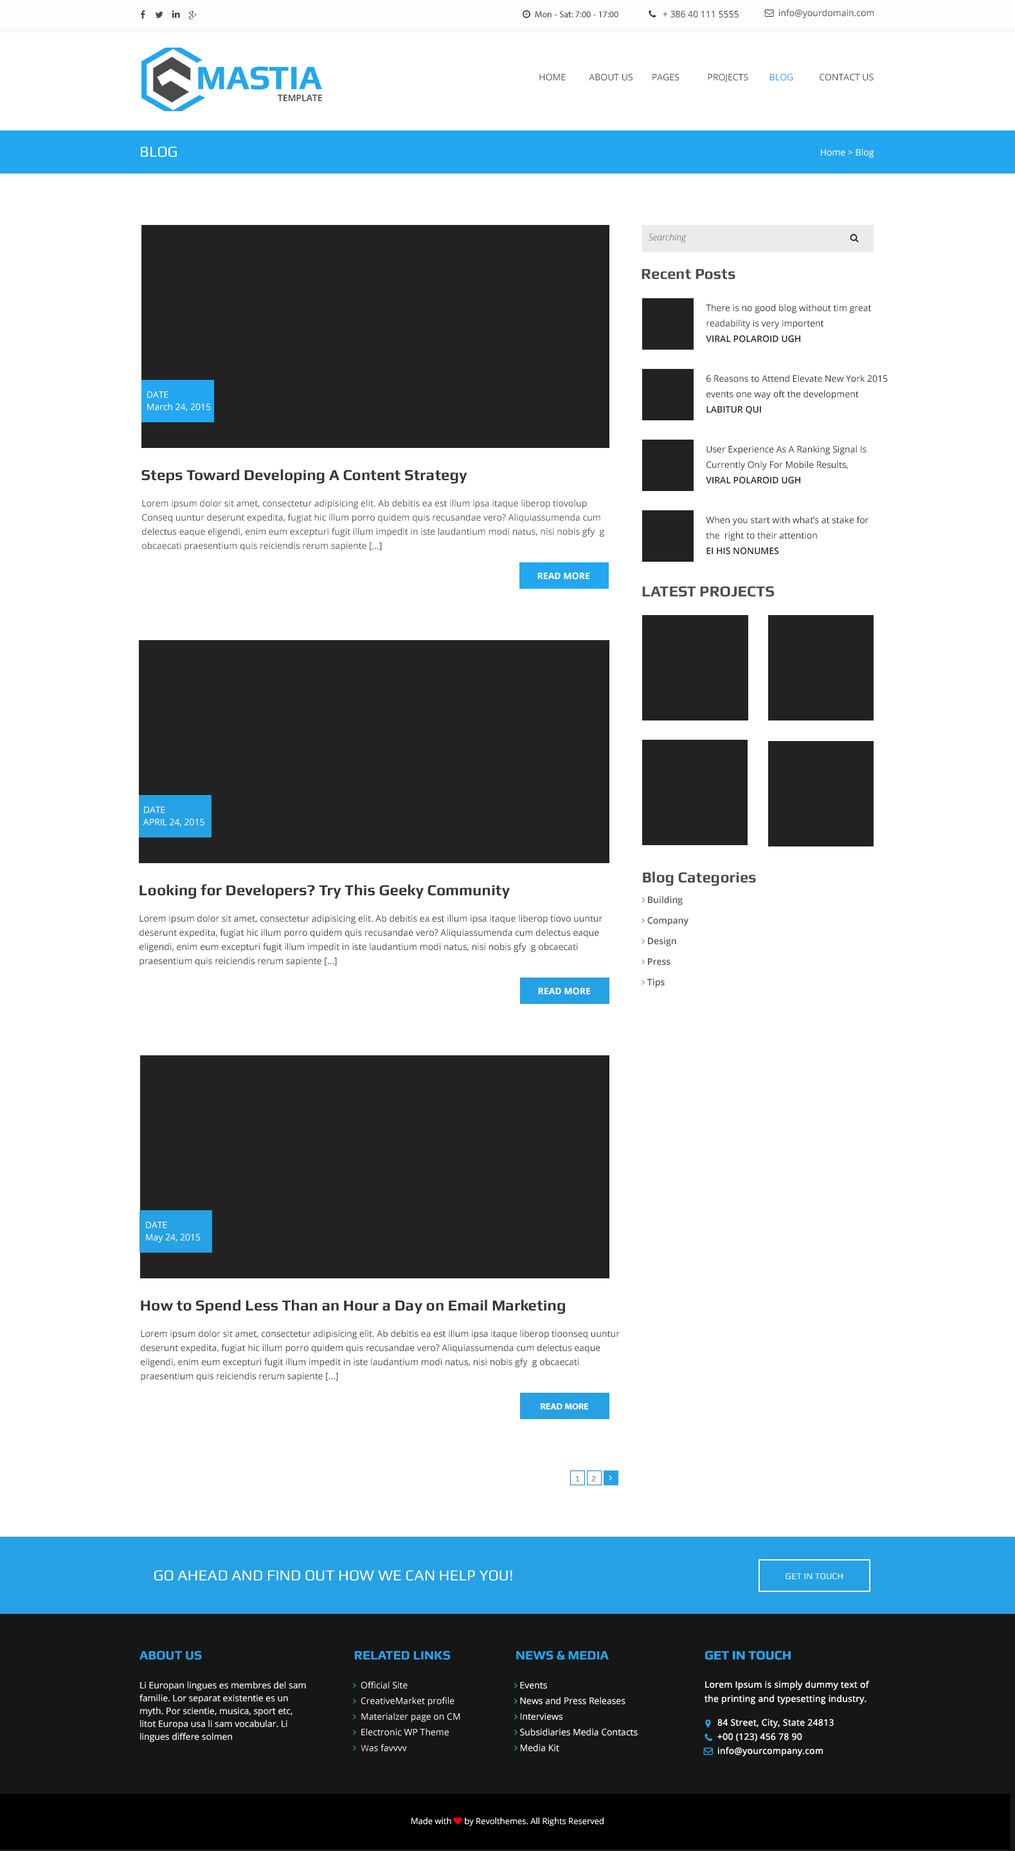
<style>
.page{position:relative;width:1015px;height:1851px;background:#ffffff}
.page>*{position:absolute;margin:0}
.t1{font:9px "OpenSans";color:#4b4b4b;text-transform:uppercase}
.t2{font:9px "OpenSans";color:#26a1e4;text-transform:uppercase}
.t3{font:15.4px "Play";color:#ffffff;text-transform:uppercase}
.t4{font:9px "OpenSans";color:#ffffff}
.t5{font:9px "OpenSansLight-Italic";color:#222222}
.t6{font:15.4px "Play-Bold";color:#4b4b4b}
.t7{font:9px/15.4px "OpenSans";color:#222222}
.t8{font:9px/15.4px "OpenSans-Semibold";color:#222222;text-transform:uppercase}
.t9{font:9px/12.2px "OpenSans";color:#ffffff}
.t10{font:15.4px "Play-Bold";color:#353535}
.t11{font:9px/14.1px "OpenSans";color:#4b4b4b}
.t12{font:9px "OpenSans-Bold";color:#ffffff}
.t13{font:9px/14.1px "OpenSans";color:#353535}
.t14{font:9px "MyriadPro-Bold";color:#ffffff}
.t15{font:9px "Raleway";color:#666666}
.t16{font:15.4px "Play";color:#ffffff}
.t17{font:9px "Play";color:#ffffff}
.t18{font:12.9px "Play-Bold";color:#22a7f0;text-transform:uppercase}
.t19{font:9px/14.1px "OpenSans";letter-spacing:0.02em;color:#ffffff}
.t20{font:12.9px/14.1px "Play-Bold";color:#22a7f0;text-transform:uppercase}
.t21{font:9px/12.9px "OpenSans";color:#ffffff}
</style>
<div class="page">
<p class="t1" style="left:539px;top:73px;width:335px;height:9px">HOME          ABOUT US        Pages            PROJECTS         <span class="t2">BLOG           </span>Contact us</p>
<p class="t3" style="left:141px;top:147px;width:36px;height:11px">BLOG</p>
<p class="t4" style="left:821px;top:148px;width:53px;height:10px">Home &gt; Blog</p>
<p class="t5" style="left:649px;top:233px;width:38px;height:10px">Searching</p>
<p class="t6" style="left:642px;top:269px;width:93px;height:11px">Recent Posts</p>
<p class="t7" style="left:706px;top:304px;width:166px;height:39px">There is no good blog without tim great readability is very importent<br><span class="t8">Viral polaroid ugh</span></p>
<p class="t7" style="left:706px;top:375px;width:182px;height:40px">6 Reasons to Attend Elevate New York 2015<br>events one way oft the development<br><span class="t8">labitur qui</span></p>
<p class="t9" style="left:147px;top:392px;width:64px;height:19px">DATE<br>March 24, 2015</p>
<p class="t7" style="left:706px;top:446px;width:161px;height:38px">User Experience As A Ranking Signal Is  Currently Only For Mobile Results,<br><span class="t8">Viral polaroid ugh</span></p>
<p class="t10" style="left:141px;top:469px;width:326px;height:15px">Steps Toward Developing A Content Strategy</p>
<p class="t11" style="left:142px;top:500px;width:462px;height:52px">Lorem ipsum dolor sit amet, consectetur adipisicing elit. Ab debitis ea est illum ipsa itaque liberop tiovolup Conseq uuntur deserunt expedita, fugiat hic illum porro quidem quis recusandae vero? Aliquiassumenda cum delectus eaque eligendi, enim eum excepturi fugit illum impedit in iste laudantium modi natus, nisi nobis gfy  g obcaecati praesentium quis reiciendis rerum sapiente […]</p>
<p class="t7" style="left:706px;top:516px;width:163px;height:39px">When you start with what’s at stake for <br>the  right to their attention<br><span class="t8">Ei his nonumes</span></p>
<p class="t12" style="left:537px;top:572px;width:53px;height:8px">READ MORE</p>
<p class="t6" style="left:642px;top:586px;width:133px;height:11px">LATEST PROJECTS</p>
<p class="t9" style="left:143px;top:807px;width:61px;height:20px">DATE<br>APRIL 24, 2015</p>
<p class="t10" style="left:140px;top:885px;width:370px;height:14px">Looking for Developers? Try This Geeky Community</p>
<p class="t13" style="left:140px;top:915px;width:462px;height:52px">Lorem ipsum dolor sit amet, consectetur adipisicing elit. Ab debitis ea est illum ipsa itaque liberop tiovo uuntur deserunt expedita, fugiat hic illum porro quidem quis recusandae vero? Aliquiassumenda cum delectus eaque eligendi, enim eum excepturi fugit illum impedit in iste laudantium modi natus, nisi nobis gfy  g obcaecati praesentium quis reiciendis rerum sapiente […]</p>
<p class="t12" style="left:538px;top:987px;width:52px;height:8px">READ MORE</p>
<p class="t9" style="left:146px;top:1222px;width:55px;height:21px">DATE<br>May 24, 2015</p>
<p class="t10" style="left:141px;top:1300px;width:424px;height:15px">How to Spend Less Than an Hour a Day on Email Marketing</p>
<p class="t13" style="left:141px;top:1330px;width:479px;height:52px">Lorem ipsum dolor sit amet, consectetur adipisicing elit. Ab debitis ea est illum ipsa itaque liberop tioonseq uuntur deserunt expedita, fugiat hic illum porro quidem quis recusandae vero? Aliquiassumenda cum delectus eaque eligendi, enim eum excepturi fugit illum impedit in iste laudantium modi natus, nisi nobis gfy  g obcaecati praesentium quis reiciendis rerum sapiente […]</p>
<p class="t14" style="left:541px;top:1403px;width:47px;height:7px">READ MORE</p>
<p class="t15" style="left:576px;top:1476px;width:3px;height:6px">1</p>
<p class="t15" style="left:591px;top:1476px;width:5px;height:6px">2</p>
<p class="t16" style="left:154px;top:1571px;width:358px;height:10px">GO AHEAD AND FIND OUT HOW WE CAN HELP YOU!</p>
<p class="t17" style="left:786px;top:1573px;width:57px;height:7px">GET IN TOUCH</p>
<p class="t18" style="left:140px;top:1651px;width:62px;height:10px">About Us</p>
<p class="t18" style="left:355px;top:1651px;width:95px;height:10px">Related Links</p>
<p class="t18" style="left:516px;top:1651px;width:93px;height:10px">News &amp; Media</p>
<p class="t19" style="left:705px;top:1651px;width:165px;height:106px"><span class="t20">Get in touch<br><br></span>Lorem Ipsum is simply dummy text of the printing and typesetting industry. <br>84 Street, City, State 24813<br>+00 (123) 456 78 90<br>info@yourcompany.com</p>
<p class="t21" style="left:140px;top:1682px;width:166px;height:61px">Li Europan lingues es membres del sam familie. Lor separat existentie es un myth. Por scientie, musica, sport etc, litot Europa usa li sam vocabular. Li lingues differe solmen</p>
</div>
